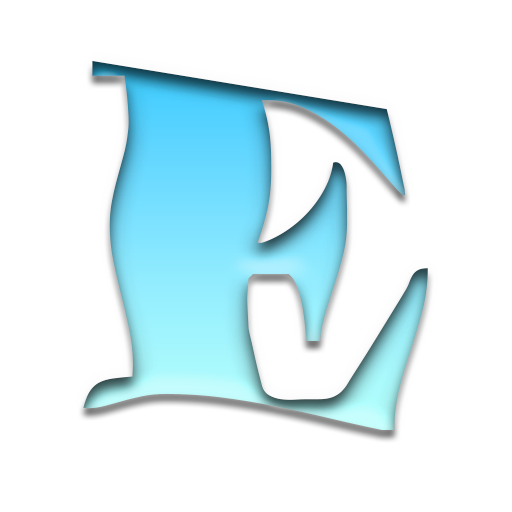
<style>
.page{position:relative;width:512px;height:512px;background:#ffffff}
.page>*{position:absolute;margin:0}
.t1{font:445.8px "UnderwaterLove";letter-spacing:-0.04em}
</style>
<div class="page">
<p class="t1" style="left:83px;top:61px;width:345px;height:369px">E</p>
</div>
